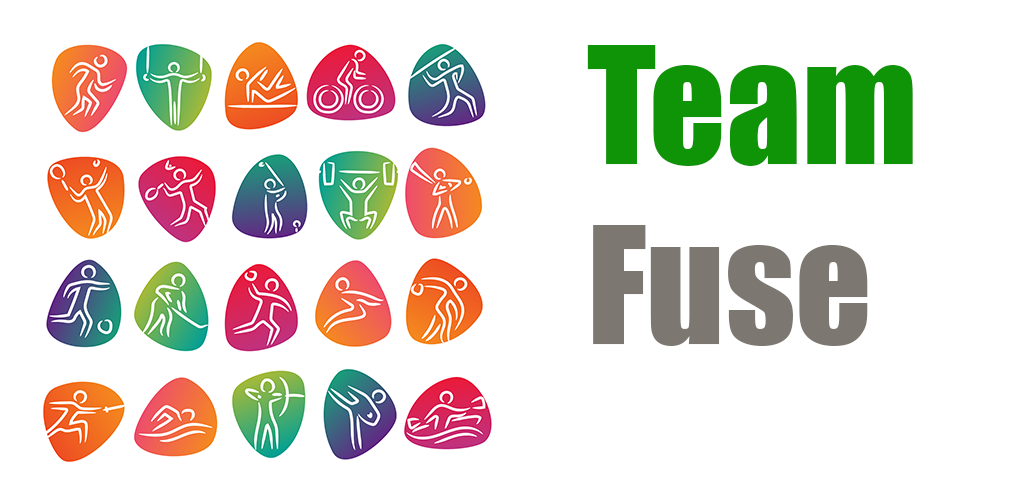
<style>
.page{position:relative;width:1024px;height:500px;background:#ffffff}
.page>*{position:absolute;margin:0}
.t1{font:150px "Impact";color:#0f9408}
.t2{font:150px "Impact";color:#7c7770}
</style>
<div class="page">
<p class="t1" style="left:587px;top:45px;width:326px;height:301px">Team<br><span class="t2">Fuse</span></p>
</div>
